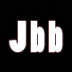
<style>
.page{position:relative;width:72px;height:72px;background:#000000}
.page>*{position:absolute;margin:0}
.t1{font:41px "PoplarStd";letter-spacing:0.075em;color:#ffffff}
</style>
<div class="page">
<p class="t1" style="left:9px;top:21px;width:54px;height:31px">Jbb</p>
</div>
